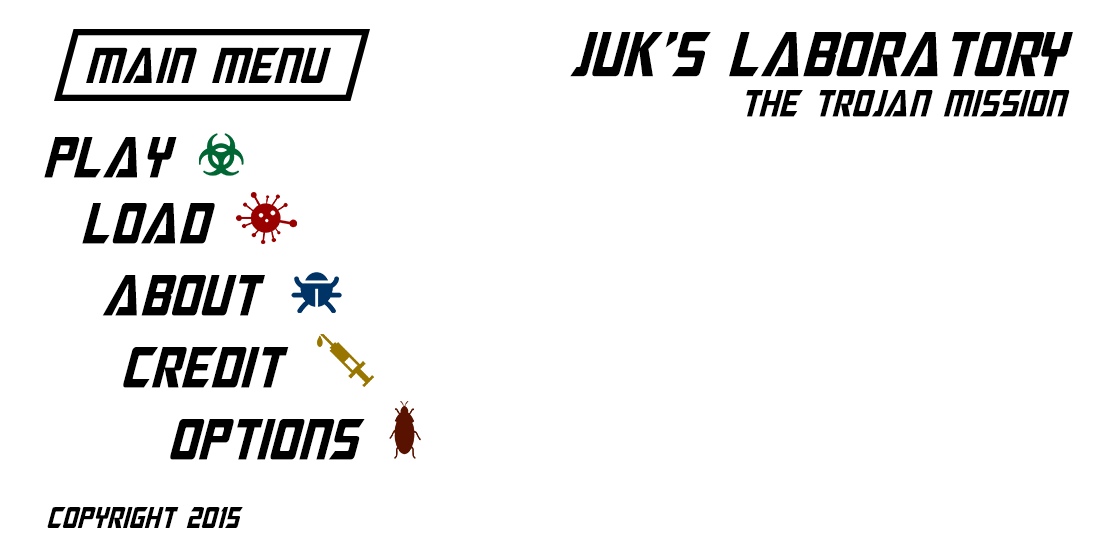
<style>
.page{position:relative;width:1100px;height:550px;background:#ffffff}
.page>*{position:absolute;margin:0}
.t1{font:63.8px "MegatronCondensed-Italic";color:#000000}
.t2{font:50.6px "MegatronCondensed-Italic";color:#000000}
.t3{font:38.3px "MegatronCondensed-Italic";color:#000000}
.t4{font:58.3px "MegatronCondensed-Italic";color:#000000}
.t5{font:30px "MegatronCondensed-Italic";color:#000000}
</style>
<div class="page">
<p class="t1" style="left:570px;top:32px;width:503px;height:45px">JUk’S LABOratory</p>
<p class="t2" style="left:86px;top:47px;width:245px;height:36px">main menu</p>
<p class="t3" style="left:746px;top:90px;width:324px;height:27px">the trojan mission</p>
<p class="t4" style="left:44px;top:137px;width:133px;height:41px">play</p>
<p class="t4" style="left:82px;top:203px;width:133px;height:41px">load</p>
<p class="t4" style="left:102px;top:275px;width:163px;height:41px">about</p>
<p class="t4" style="left:123px;top:347px;width:166px;height:41px">credit</p>
<p class="t4" style="left:170px;top:419px;width:195px;height:41px">options</p>
<p class="t5" style="left:47px;top:507px;width:196px;height:21px">copyright 2015</p>
</div>
